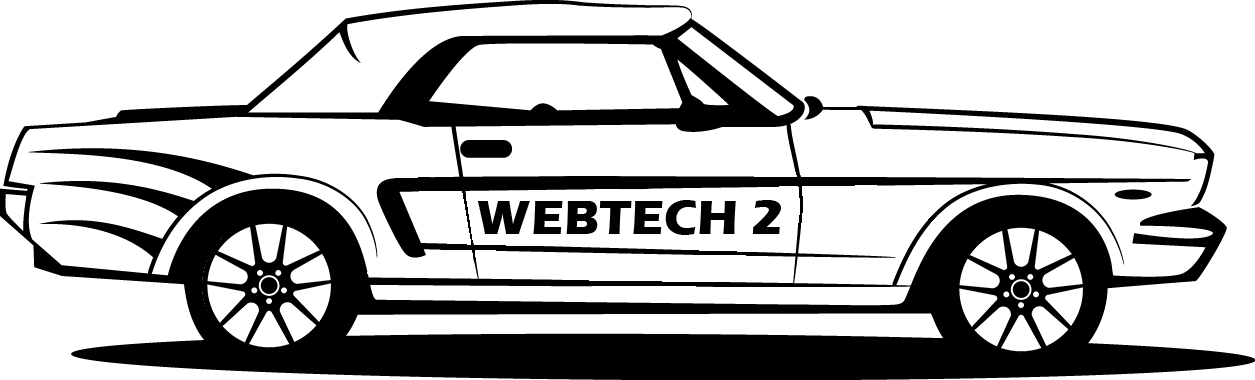
<style>
.page{position:relative;width:1255px;height:380px;background:#ffffff}
.page>*{position:absolute;margin:0}
.t1{font:50px "ErasITC-Bold";color:#000000}
</style>
<div class="page">
<p class="t1" style="left:477px;top:200px;width:304px;height:35px">WEBTECH 2</p>
</div>
